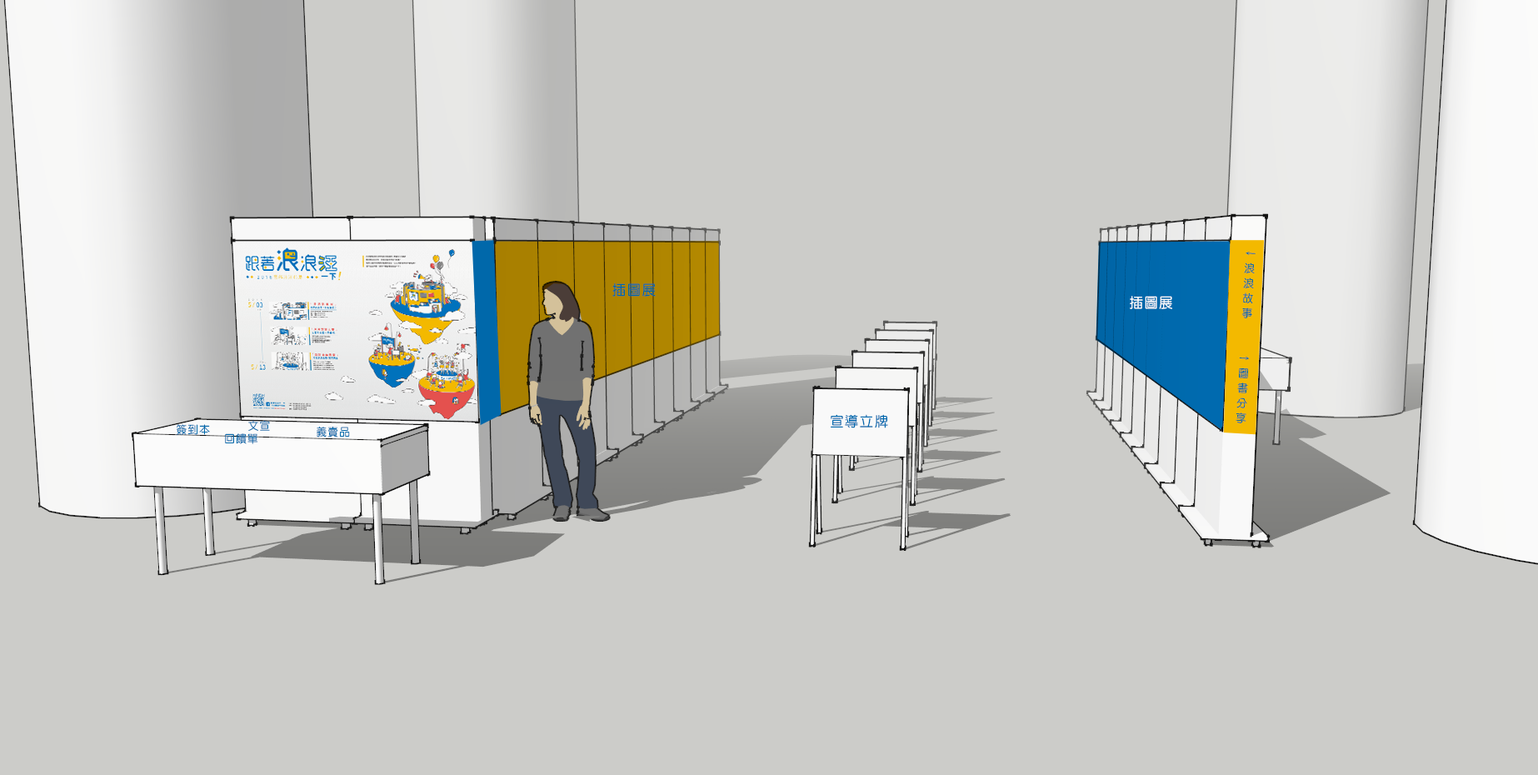
<style>
.page{position:relative;width:1538px;height:775px;background:#ccccc9}
.page>*{position:absolute;margin:0}
.t1{font:11.1px/15px "DFYuan-Bd-HK-BF";letter-spacing:0.1em;color:#0068aa;scale:0.95 1}
.t2{font:14.3px "DFYuan-Bd-HK-BF";letter-spacing:0.1em;color:#0068aa;scale:0.95 1}
.t3{font:14.3px "DFYuan-Bd-HK-BF";letter-spacing:0.1em;color:#fefefe;scale:0.95 1}
.t4{font:11.1px "DFYuan-Bd-HK-BF";letter-spacing:0.1em;color:#0068aa;scale:0.95 1}
.t5{font:14.3px "DFYuan-Bd-HK-BF";letter-spacing:0.1em;color:#006aaf;scale:0.95 1}
</style>
<div class="page">
<p class="t1" style="left:1236px;top:252px;width:20px;height:171px;rotate:3deg">←<br>浪<br>浪<br>故<br>事<br><br><br>→<br>圖<br>書<br>分<br>享</p>
<p class="t2" style="left:613px;top:283px;width:43px;height:14px">插圖展</p>
<p class="t3" style="left:1130px;top:296px;width:43px;height:13px">插圖展</p>
<p class="t4" style="left:177px;top:424px;width:33px;height:11px">簽到本</p>
<p class="t4" style="left:248px;top:420px;width:22px;height:11px">文宣</p>
<p class="t5" style="left:831px;top:414px;width:57px;height:14px">宣導立牌</p>
<p class="t4" style="left:225px;top:433px;width:33px;height:11px">回饋單</p>
<p class="t4" style="left:317px;top:427px;width:33px;height:11px">義賣品</p>
</div>
